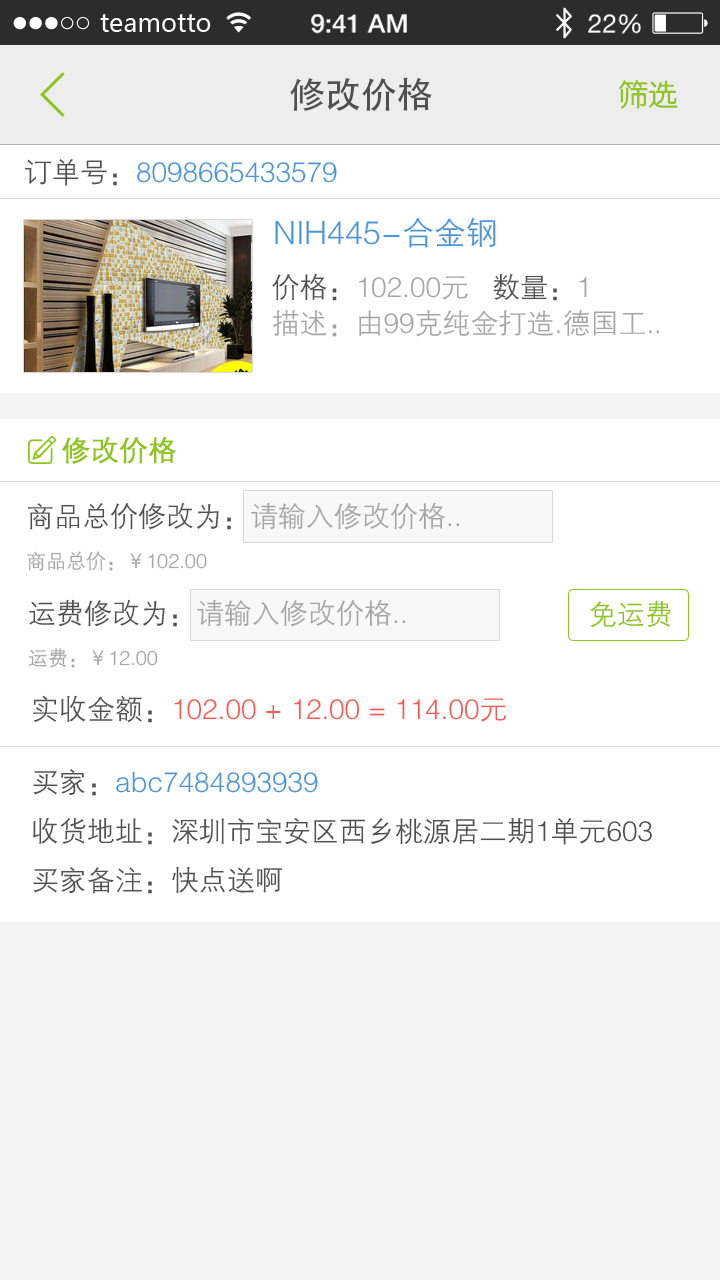
<style>
.page{position:relative;width:720px;height:1280px;background:#ffffff}
.page>*{position:absolute;margin:0}
.t1{font:36px "AdobeHeitiStd-Regular";color:#505050}
.t2{font:30px "FZY3JW--GB1-0";color:#91c521}
.t3{font:28px "FZZDXJW--GB1-0";color:#4997d9}
.t4{font:28px "FZZDXJW--GB1-0";color:#505050}
.t5{font:32px "FZZDXJW--GB1-0";color:#4997d9}
.t6{font:28px "FZZDXJW--GB1-0";color:#a6a6a6}
.t7{font:28px/36px "FZZDXJW--GB1-0";color:#505050}
.t8{font:28px/36px "FZZDXJW--GB1-0";color:#a6a6a6}
.t9{font:28px "FZZDXJW--GB1-0";color:#90c51f;font-weight:bold}
.t10{font:20px "FZZDXJW--GB1-0";color:#a6a6a6}
.t11{font:28px "FZZDXJW--GB1-0";color:#90c51f}
.t12{font:28px/24px "FZZDXJW--GB1-0";color:#505050}
.t13{font:28px/24px "FZZDXJW--GB1-0";color:#f65b53}
</style>
<div class="page">
<p class="t1" style="left:290px;top:77px;width:142px;height:34px">修改价格</p>
<p class="t2" style="left:619px;top:80px;width:59px;height:29px">筛选</p>
<p class="t3" style="left:24px;top:158px;width:313px;height:28px"><span class="t4"> 订单号：</span>8098665433579</p>
<p class="t5" style="left:275px;top:217px;width:221px;height:31px">NIH445-合金钢</p>
<p class="t6" style="left:272px;top:273px;width:388px;height:64px"><span class="t7">价格：</span><span class="t8">102.00元   </span><span class="t7">数量：</span><span class="t8">1<br></span>描述：由99克纯金打造.德国工..</p>
<p class="t9" style="left:62px;top:436px;width:114px;height:28px">修改价格</p>
<p class="t10" style="left:27px;top:502px;width:433px;height:69px"><span class="t4">商品总价修改为：</span><span class="t6">请输入修改价格..<br></span>商品总价：￥102.00</p>
<p class="t6" style="left:28px;top:599px;width:378px;height:69px"><span class="t4">运费修改为：</span>请输入修改价格..<br><span class="t10">运费：￥12.00</span></p>
<p class="t11" style="left:590px;top:600px;width:81px;height:28px">免运费</p>
<p class="t4" style="left:32px;top:695px;width:620px;height:199px"><span class="t12">实收金额：</span><span class="t13">102.00 + 12.00 = 114.00元<br><br></span>买家：<span class="t3">abc7484893939<br></span>收货地址：深圳市宝安区西乡桃源居二期1单元603<br>买家备注：快点送啊</p>
</div>
